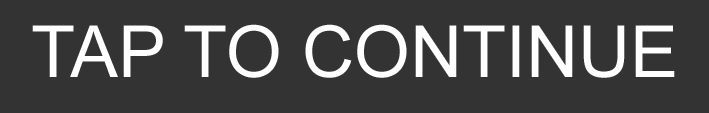
<style>
.page{position:relative;width:709px;height:113px;background:#333333}
.page>*{position:absolute;margin:0}
.t1{font:71.9px "ArialMT";color:#ffffff}
</style>
<div class="page">
<p class="t1" style="left:32px;top:24px;width:643px;height:54px">TAP TO CONTINUE</p>
</div>
